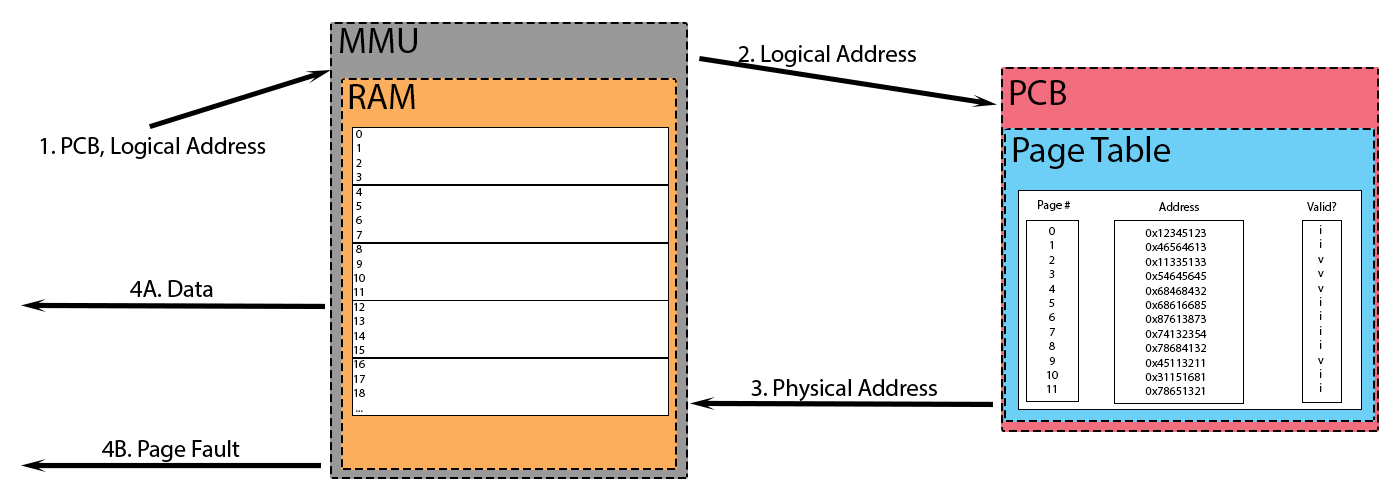
<style>
.page{position:relative;width:1400px;height:500px;background:#ffffff}
.page>*{position:absolute;margin:0}
.t1{font:36px "MyriadPro-Regular";color:#000000}
.t2{font:24px "MyriadPro-Regular";color:#000000}
.t3{font:12px "MyriadPro-Regular";color:#000000}
</style>
<div class="page">
<p class="t1" style="left:340px;top:28px;width:77px;height:25px">MMU</p>
<p class="t2" style="left:738px;top:45px;width:178px;height:22px">2. Logical Address</p>
<p class="t1" style="left:349px;top:84px;width:66px;height:25px">RAM</p>
<p class="t1" style="left:1010px;top:80px;width:56px;height:25px">PCB</p>
<p class="t2" style="left:40px;top:137px;width:226px;height:22px">1. PCB, Logical Address</p>
<p class="t3" style="left:354px;top:130px;width:12px;height:282px;text-align:center">0<br>1<br>2<br>3<br>4<br>5<br>6<br>7<br>8<br>9<br>10<br>11<br>12<br>13<br>14<br>15<br>16<br>17<br>18<br>...</p>
<p class="t1" style="left:1013px;top:136px;width:157px;height:33px">Page Table</p>
<p class="t3" style="left:1038px;top:200px;width:32px;height:11px">Page #</p>
<p class="t3" style="left:1159px;top:202px;width:40px;height:9px">Address</p>
<p class="t3" style="left:1307px;top:202px;width:30px;height:9px">Valid?</p>
<p class="t3" style="left:1047px;top:227px;width:11px;height:166px;text-align:center">0<br>1<br>2<br>3<br>4<br>5<br>6<br>7<br>8<br>9<br>10<br>11</p>
<p class="t3" style="left:1145px;top:229px;width:62px;height:166px;text-align:center">0x12345123<br>0x46564613<br>0x11335133<br>0x54645645<br>0x68468432<br>0x68616685<br>0x87613873<br>0x74132354<br>0x78684132<br>0x45113211<br>0x31151681<br>0x78651321</p>
<p class="t3" style="left:1318px;top:225px;width:6px;height:167px;text-align:center">i<br>i<br>v<br>v<br>v<br>i<br>i<br>i<br>i<br>v<br>i<br>i</p>
<p class="t2" style="left:130px;top:280px;width:83px;height:17px">4A. Data</p>
<p class="t2" style="left:751px;top:379px;width:186px;height:22px">3. Physical Address</p>
<p class="t2" style="left:102px;top:440px;width:138px;height:22px">4B. Page Fault</p>
</div>
